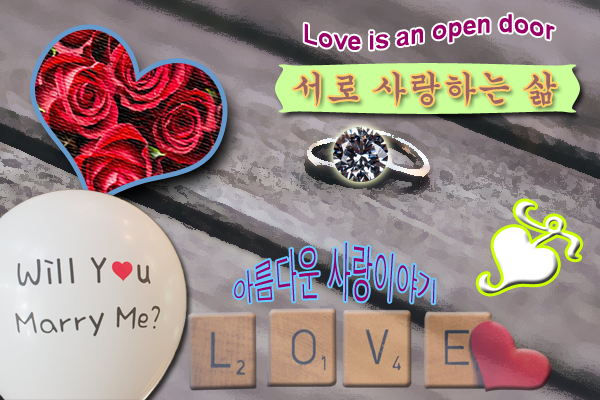
<style>
.page{position:relative;width:600px;height:400px}
.page>*{position:absolute;margin:0}
.t1{font:25px "Arial-BoldMT";color:#990066}
.t2{font:35px "Gungsuh";color:#996666}
.t3{font:22px "Dotum";color:#990066}
</style>
<div class="page">
<p class="t1" style="left:304px;top:14px;width:251px;height:36px">Love is an open door</p>
<p class="t2" style="left:293px;top:71px;width:264px;height:35px">서로 사랑하는 삶</p>
<p class="t3" style="left:234px;top:242px;width:201px;height:62px">아름다운 사랑이야기</p>
</div>
